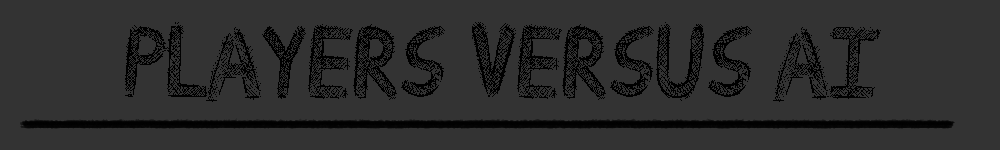
<style>
.page{position:relative;width:1000px;height:150px;background:#333333}
.page>*{position:absolute;margin:0}
.t1{font:100px "Drawing-Guides";color:#000000}
</style>
<div class="page">
<p class="t1" style="left:125px;top:22px;width:756px;height:80px">Players Versus AI</p>
</div>
